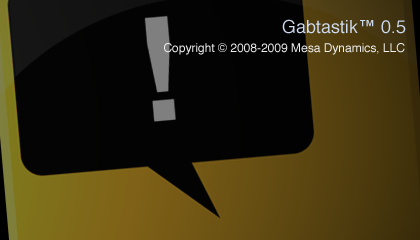
<style>
.page{position:relative;width:420px;height:240px}
.page>*{position:absolute;margin:0}
.t1{font:18px "Helvetica";color:#ccd9ef}
.t2{font:12px "Helvetica";color:#efefef}
</style>
<div class="page">
<p class="t1" style="left:282px;top:19px;width:124px;height:15px">Gabtastik™ 0.5</p>
<p class="t2" style="left:164px;top:43px;width:241px;height:12px">Copyright © 2008-2009 Mesa Dynamics, LLC</p>
</div>
